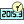
<style>
.page{position:relative;width:24px;height:24px;background:#ffffff}
.page>*{position:absolute;margin:0}
.t1{font:9px "Digital-7";letter-spacing:0.01em;color:#000000}
</style>
<div class="page">
<p class="t1" style="left:2px;top:10px;width:21px;height:8px">2015.3</p>
</div>
